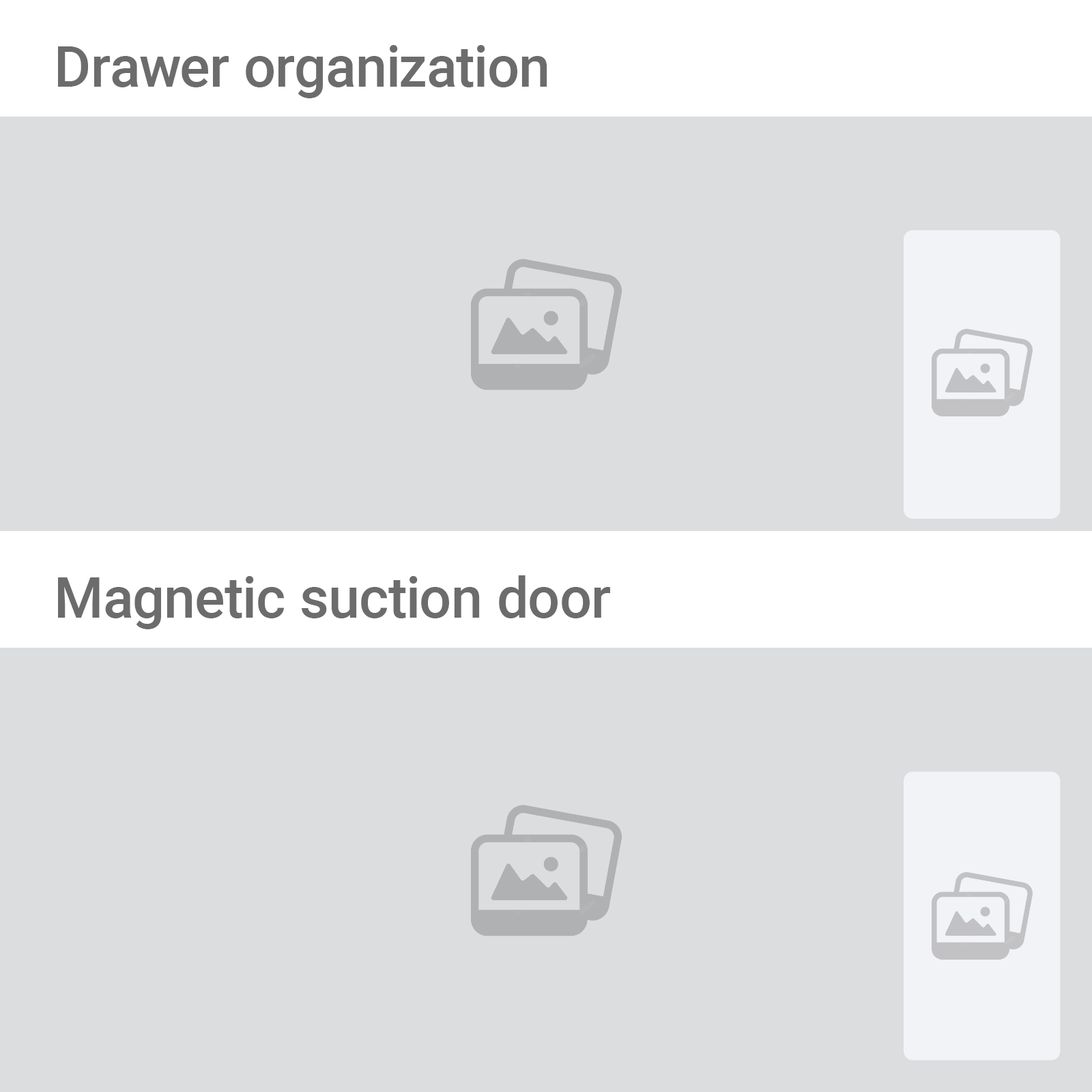
<style>
.page{position:relative;width:1092px;height:1092px;background:#dcdddf}
.page>*{position:absolute;margin:0}
.t1{font:56.8px "Roboto-Medium";color:#6c6c6c}
</style>
<div class="page">
<p class="t1" style="left:58px;top:45px;width:489px;height:53px">Drawer organization</p>
<p class="t1" style="left:58px;top:575px;width:552px;height:54px">Magnetic suction door</p>
</div>
